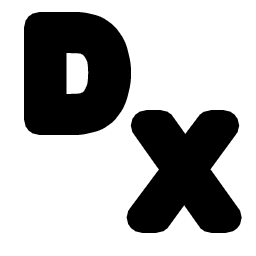
<style>
.page{position:relative;width:256px;height:256px;background:#ffffff}
.page>*{position:absolute;margin:0}
.t1{font:130px/98px "ArialMT";letter-spacing:0.01em;color:#000000;text-transform:uppercase}
</style>
<div class="page">
<p class="t1" style="left:39px;top:27px;width:188px;height:191px">D<br>   X</p>
</div>
